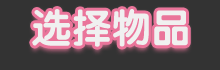
<style>
.page{position:relative;width:220px;height:70px;background:#333333}
.page>*{position:absolute;margin:0}
.t1{font:40px "JCuYuan";color:#f0f0f0}
</style>
<div class="page">
<p class="t1" style="left:32px;top:9px;width:156px;height:38px">选择物品</p>
</div>
